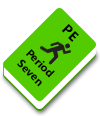
<style>
.page{position:relative;width:100px;height:116px;background:#ffffff}
.page>*{position:absolute;margin:0}
.t1{font:14.2px "LaoUI-Bold";color:#000000}
.t2{font:11.4px "LaoUI-Bold";color:#000000}
</style>
<div class="page">
<p class="t1" style="left:61px;top:24px;width:18px;height:18px;rotate:45deg">PE</p>
<p class="t2" style="left:17px;top:49px;width:38px;height:38px;text-align:center;rotate:45deg">Period <br>Seven</p>
</div>
